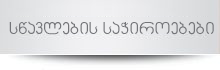
<style>
.page{position:relative;width:220px;height:70px}
.page>*{position:absolute;margin:0}
.t1{font:17px "AvazaMtavruli";color:#747579}
</style>
<div class="page">
<p class="t1" style="left:9px;top:21px;width:205px;height:14px">swavlebis saWiroebebi</p>
</div>
